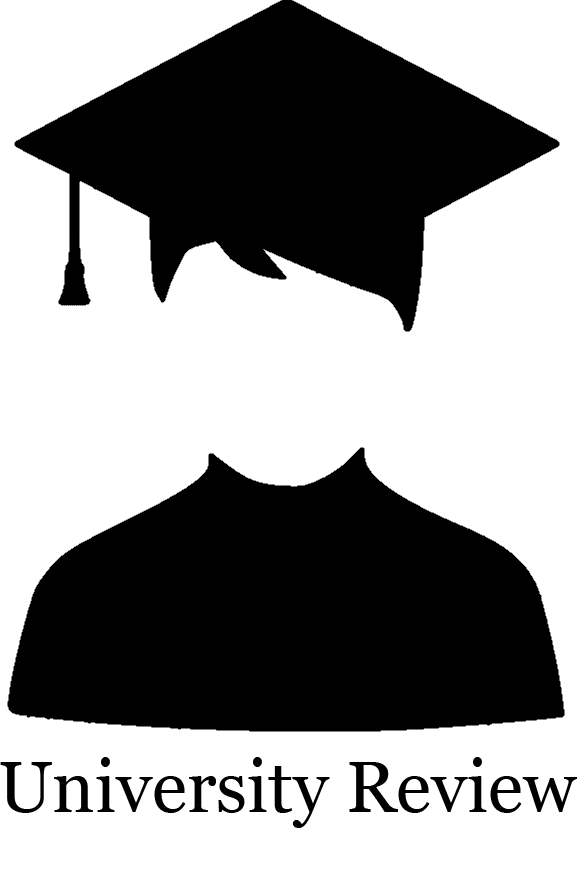
<style>
.page{position:relative;width:577px;height:869px;background:#ffffff}
.page>*{position:absolute;margin:0}
.t1{font:72px "Georgia";color:#000000}
</style>
<div class="page">
<p class="t1" style="left:0px;top:757px;width:578px;height:71px">University Review</p>
</div>
